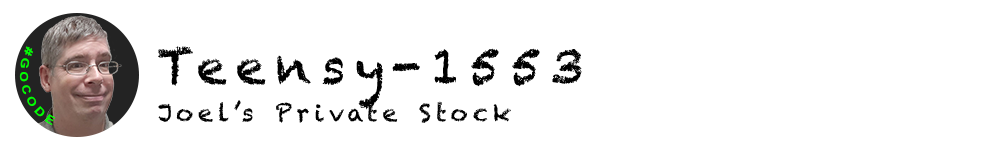
<style>
.page{position:relative;width:1000px;height:150px;background:#ffffff}
.page>*{position:absolute;margin:0}
.t1{font:11.2px "Arial-BoldMT";letter-spacing:0.2em;color:#00ff00}
.t2{font:48px "Chalkduster";letter-spacing:0.2em;color:#000000}
.t3{font:24px "Chalkduster";letter-spacing:0.2em;color:#000000}
</style>
<div class="page">
<p class="t1" style="left:19px;top:46px;width:37px;height:80px;rotate:72deg">#GOCODE</p>
<p class="t2" style="left:158px;top:46px;width:424px;height:64px">Teensy-1553</p>
<p class="t3" style="left:158px;top:100px;width:353px;height:23px">Joel’s Private Stock</p>
</div>
